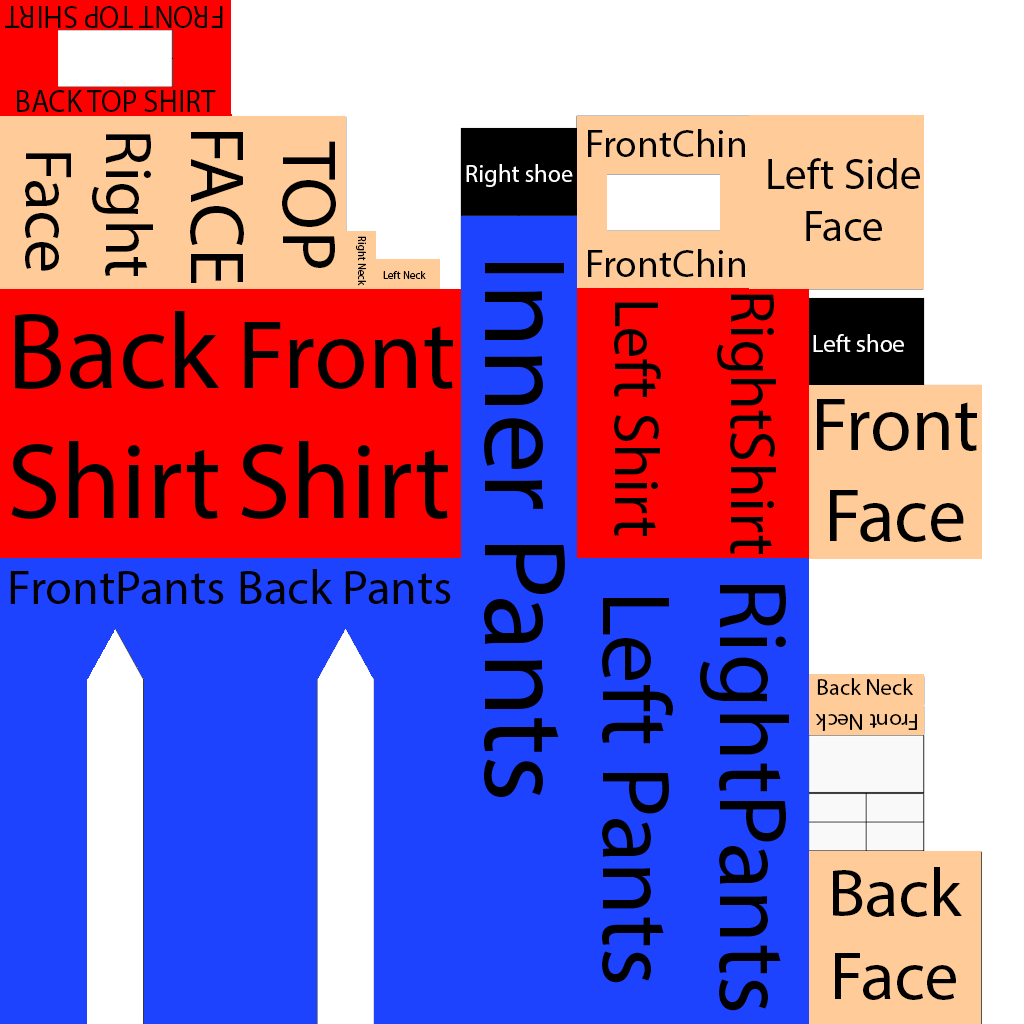
<style>
.page{position:relative;width:1024px;height:1024px;background:#1e43ff}
.page>*{position:absolute;margin:0}
.t1{font:31.3px "MyriadPro-Regular";color:#000000;scale:0.95 1}
.t2{font:66.5px "MyriadPro-Regular";color:#000000}
.t3{font:76.7px "MyriadPro-Regular";color:#000000}
.t4{font:39.4px "MyriadPro-Regular";color:#000000}
.t5{font:43.6px "MyriadPro-Regular";color:#000000}
.t6{font:24.4px "MyriadPro-Regular";color:#ffffff}
.t7{font:10.9px "MyriadPro-Regular";color:#000000}
.t8{font:117.4px "MyriadPro-Regular";color:#000000}
.t9{font:63.7px "MyriadPro-Regular";color:#000000}
.t10{font:108.7px "MyriadPro-Regular";color:#000000}
.t11{font:98.7px "MyriadPro-Regular";color:#000000}
.t12{font:75.9px "MyriadPro-Regular";color:#000000}
.t13{font:48.6px "MyriadPro-Regular";color:#000000}
.t14{font:97.3px "MyriadPro-Regular";color:#000000}
.t15{font:22.8px "MyriadPro-Regular";color:#000000}
.t16{font:69px "MyriadPro-Regular";color:#000000}
</style>
<div class="page">
<p class="t1" style="left:5px;top:6px;width:218px;height:22px;rotate:180deg">FRONT TOP SHIRT</p>
<p class="t1" style="left:17px;top:90px;width:199px;height:22px">BACK TOP SHIRT</p>
<p class="t2" style="left:25px;top:134px;width:128px;height:142px;text-align:center;rotate:90deg">Right <br>Face</p>
<p class="t3" style="left:190px;top:132px;width:146px;height:151px;text-align:center;rotate:90deg">TOP<br>FACE</p>
<p class="t4" style="left:588px;top:129px;width:157px;height:28px">FrontChin</p>
<p class="t5" style="left:768px;top:158px;width:152px;height:83px;text-align:center">Left Side<br>Face</p>
<p class="t6" style="left:466px;top:164px;width:107px;height:23px">Right shoe</p>
<p class="t7" style="left:356px;top:236px;width:10px;height:50px;rotate:90deg">Right Neck</p>
<p class="t4" style="left:588px;top:249px;width:157px;height:28px">FrontChin</p>
<p class="t8" style="left:483px;top:263px;width:82px;height:534px;rotate:90deg">Inner Pants</p>
<p class="t7" style="left:383px;top:271px;width:43px;height:8px">Left Neck</p>
<p class="t9" style="left:717px;top:294px;width:59px;height:260px;rotate:90deg">RightShirt</p>
<p class="t9" style="left:614px;top:302px;width:47px;height:234px;rotate:90deg">Left Shirt</p>
<p class="t10" style="left:11px;top:311px;width:209px;height:208px">Back<br>Shirt</p>
<p class="t11" style="left:241px;top:322px;width:212px;height:197px">Front<br><span class="t10">Shirt</span></p>
<p class="t6" style="left:813px;top:334px;width:91px;height:18px">Left shoe</p>
<p class="t12" style="left:817px;top:399px;width:160px;height:143px;text-align:center">Front<br>Face</p>
<p class="t13" style="left:240px;top:569px;width:211px;height:35px">Back Pants</p>
<p class="t13" style="left:10px;top:571px;width:214px;height:33px">FrontPants</p>
<p class="t14" style="left:700px;top:585px;width:89px;height:426px;rotate:90deg">RightPants</p>
<p class="t14" style="left:602px;top:598px;width:71px;height:385px;rotate:90deg">Left Pants</p>
<p class="t15" style="left:817px;top:678px;width:96px;height:17px">Back Neck</p>
<p class="t15" style="left:815px;top:714px;width:102px;height:17px;rotate:180deg">Front Neck</p>
<p class="t16" style="left:833px;top:867px;width:129px;height:133px;text-align:center">Back<br>Face</p>
</div>
